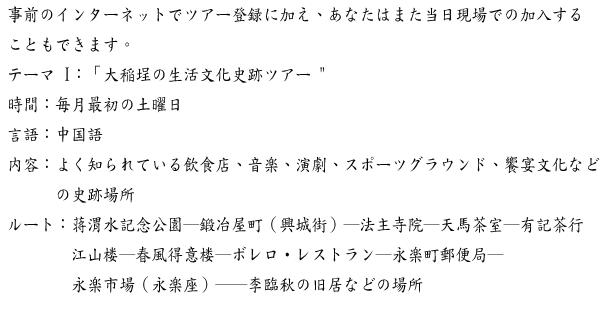
<style>
.page{position:relative;width:600px;height:313px;background:#ffffff}
.page>*{position:absolute;margin:0}
.t1{font:18px/30px "DFKaiShu-SB-Estd-BF";color:#060606;scale:0.89 1}
</style>
<div class="page">
<p class="t1" style="left:8px;top:6px;width:592px;height:287px">事前のインターネットでツアー登録に加え、あなたはまた当日現場での加入する<br>こともできます。<br>テーマ I：「大稲埕の生活文化史跡ツアー "<br>時間：毎月最初の土曜日<br>言語：中国語<br>内容：よく知られている飲食店、音楽、演劇、スポーツグラウンド、饗宴文化など<br>      の史跡場所<br>ルート：蒋渭水記念公園─鍛冶屋町（興城街）─法主寺院─天馬茶室─有記茶行<br>        江山楼─春風得意楼─ボレロ・レストラン─永楽町郵便局─<br>        永楽市場（永楽座）──李臨秋の旧居などの場所</p>
</div>
